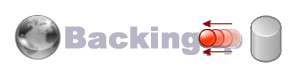
<style>
.page{position:relative;width:300px;height:73px;background:#ffffff}
.page>*{position:absolute;margin:0}
.t1{font:30px "Arial-Black";color:#b6b6c8;font-weight:bold}
</style>
<div class="page">
<p class="t1" style="left:63px;top:27px;width:181px;height:41px">Backingup</p>
</div>
